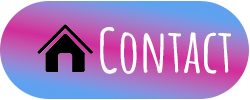
<style>
.page{position:relative;width:250px;height:100px}
.page>*{position:absolute;margin:0}
.t1{font:60px "AmaticSC-Bold";color:#ffffff}
</style>
<div class="page">
<p class="t1" style="left:100px;top:27px;width:131px;height:47px">Contact</p>
</div>
